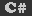
<style>
.page{position:relative;width:32px;height:16px;background:#333333}
.page>*{position:absolute;margin:0}
.t1{font:16px "CooperBlack";color:#cacaca}
</style>
<div class="page">
<p class="t1" style="left:5px;top:2px;width:21px;height:11px">C#</p>
</div>
